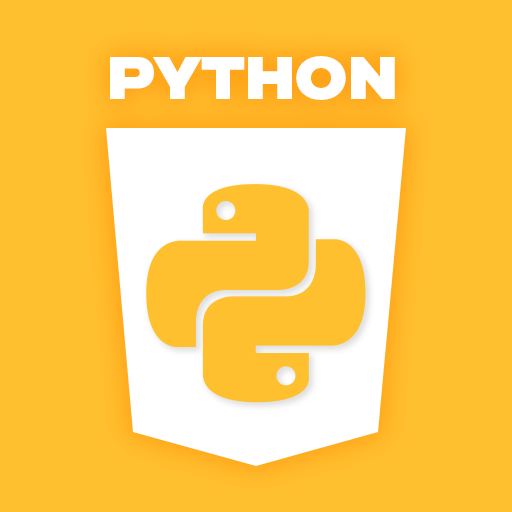
<style>
.page{position:relative;width:512px;height:512px;background:#ffc02f}
.page>*{position:absolute;margin:0}
.t1{font:63.8px "CANegroni-Black";letter-spacing:-0.03em;color:#ffffff}
</style>
<div class="page">
<p class="t1" style="left:110px;top:56px;width:285px;height:44px">python</p>
</div>
